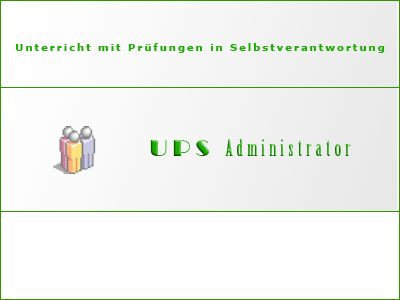
<style>
.page{position:relative;width:400px;height:300px;background:#ffffff}
.page>*{position:absolute;margin:0}
.t1{font:10px "Verdana-Bold";letter-spacing:0.2em;color:#1cab00}
.t2{font:22px "BirchStd";letter-spacing:0.2em}
.t3{font:24px "Broadway";letter-spacing:0.2em}
</style>
<div class="page">
<p class="t1" style="left:16px;top:43px;width:369px;height:10px">Unterricht mit Prüfungen in Selbstverantwortung</p>
<p class="t2" style="left:150px;top:139px;width:201px;height:17px"><span class="t3">UPS </span>Administrator</p>
</div>
